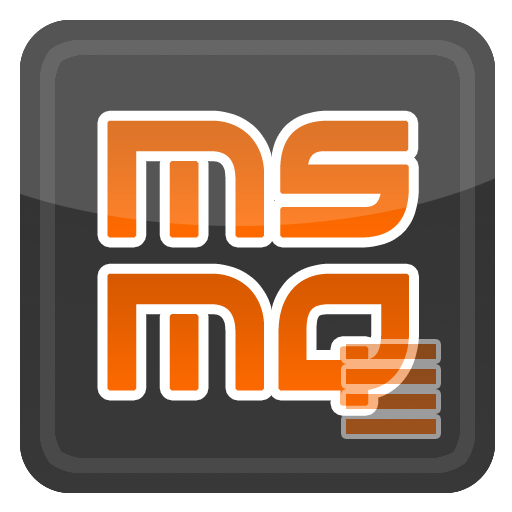
<style>
.page{position:relative;width:512px;height:512px;background:#ffffff}
.page>*{position:absolute;margin:0}
.t1{font:146px "Xirod-Regular";letter-spacing:-0.012em;color:#ed7829;font-weight:bold;scale:0.9 1}
.t2{font:146px "Xirod-Regular";letter-spacing:-0.012em;color:#e56000;font-weight:bold;scale:0.9 1}
.t3{font:146px "Xirod-Regular";letter-spacing:-0.012em;color:#e56000;font-weight:bold;scale:0.87 1}
</style>
<div class="page">
<p class="t1" style="left:107px;top:120px;width:302px;height:118px">ms</p>
<p class="t2" style="left:107px;top:273px;width:302px;height:133px">m<span class="t3">q</span></p>
</div>
